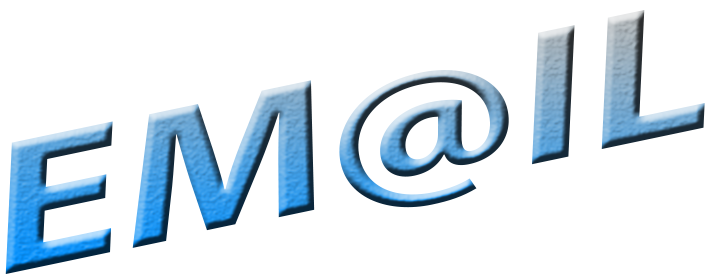
<style>
.page{position:relative;width:713px;height:280px;background:#ffffff}
.page>*{position:absolute;margin:0}
.t1{font:188.8px "MyriadPro-BoldIt";scale:1.36 1}
</style>
<div class="page">
<p class="t1" style="left:5px;top:10px;width:700px;height:264px;rotate:-12deg">EM@IL</p>
</div>
